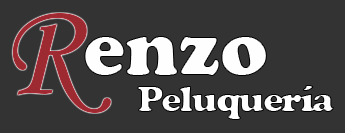
<style>
.page{position:relative;width:345px;height:133px;background:#333333}
.page>*{position:absolute;margin:0}
.t1{font:136px "MonotypeCorsiva";color:#9d2a31}
.t2{font:80px "CooperBlack";color:#fefefe}
.t3{font:38.7px "CooperBlack";letter-spacing:-0.05em;color:#ffffff}
</style>
<div class="page">
<p class="t1" style="left:12px;top:13px;width:99px;height:100px">R</p>
<p class="t2" style="left:84px;top:36px;width:183px;height:40px">enzo</p>
<p class="t3" style="left:137px;top:85px;width:197px;height:35px">Peluquería</p>
</div>
